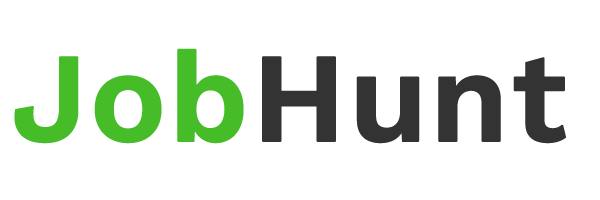
<style>
.page{position:relative;width:600px;height:200px;background:#ffffff}
.page>*{position:absolute;margin:0}
.t1{font:127px "WorkSans-SemiBold";color:#333333;font-weight:bold}
.t2{font:127px "WorkSans-SemiBold";color:#46bc29;font-weight:bold}
</style>
<div class="page">
<p class="t1" style="left:14px;top:48px;width:553px;height:96px"><span class="t2">Job</span>Hunt</p>
</div>
